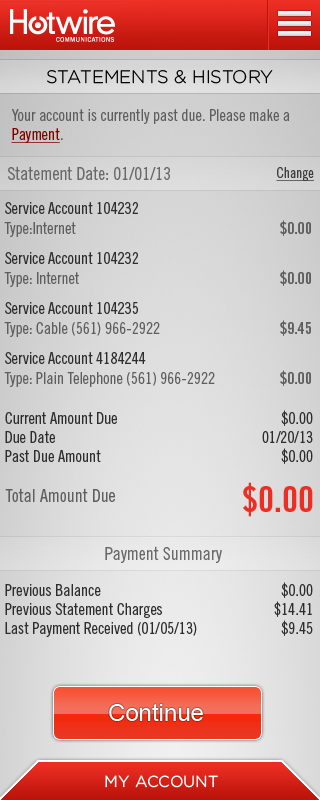
<style>
.page{position:relative;width:320px;height:800px}
.page>*{position:absolute;margin:0}
.t1{font:18px "Gotham-Light";color:#000000;text-transform:uppercase}
.t2{font:16px "TradeGothicLTStd-Cn18";color:#5e5e5e}
.t3{font:16px "TradeGothicLTStd-Cn18";color:#810000;text-decoration:underline}
.t4{font:18px "TradeGothicLTStd-Cn18";color:#696969}
.t5{font:14px "TradeGothicLTStd-Cn18";color:#3e3e3e;text-decoration:underline}
.t6{font:16px "TradeGothicLTStd-Cn18";color:#2d2d2d}
.t7{font:16px "TradeGothicLTStd-BdCn20";color:#5e5e5e}
.t8{font:36px "TradeGothicLTStd-BdCn20";color:#ed2e24}
.t9{font:18px "TradeGothicLTStd-Cn18";color:#5e5e5e}
.t10{font:24px "ArialMT";color:#ffffff}
.t11{font:16px "Gotham-Book";color:#ffffff;text-transform:uppercase}
</style>
<div class="page">
<p class="t1" style="left:47px;top:70px;width:226px;height:14px">Statements &amp; History</p>
<p class="t2" style="left:11px;top:109px;width:279px;height:34px">Your account is currently past due. Please make a <span class="t3">Payment</span>.</p>
<p class="t4" style="left:8px;top:166px;width:162px;height:14px">Statement Date: 01/01/13</p>
<p class="t5" style="left:276px;top:167px;width:38px;height:14px">Change</p>
<p class="t6" style="left:5px;top:202px;width:133px;height:12px">Service Account 104232</p>
<p class="t2" style="left:4px;top:222px;width:72px;height:15px">Type:Internet</p>
<p class="t7" style="left:280px;top:220px;width:31px;height:16px">$0.00</p>
<p class="t6" style="left:5px;top:252px;width:133px;height:12px">Service Account 104232</p>
<p class="t7" style="left:280px;top:270px;width:31px;height:16px">$0.00</p>
<p class="t2" style="left:4px;top:272px;width:75px;height:15px">Type: Internet</p>
<p class="t6" style="left:5px;top:302px;width:133px;height:12px">Service Account 104235</p>
<p class="t2" style="left:4px;top:322px;width:156px;height:15px">Type: Cable (561) 966-2922</p>
<p class="t7" style="left:280px;top:320px;width:31px;height:16px">$9.45</p>
<p class="t6" style="left:5px;top:352px;width:141px;height:12px">Service Account 4184244</p>
<p class="t2" style="left:4px;top:372px;width:211px;height:15px">Type: Plain Telephone (561) 966-2922</p>
<p class="t7" style="left:280px;top:370px;width:31px;height:16px">$0.00</p>
<p class="t6" style="left:5px;top:412px;width:112px;height:50px">Current Amount Due<br>Due Date<br>Past Due Amount</p>
<p class="t6" style="left:262px;top:410px;width:51px;height:54px;text-align:right">$0.00<br>01/20/13<br>$0.00</p>
<p class="t8" style="left:243px;top:482px;width:70px;height:35px">$0.00</p>
<p class="t9" style="left:5px;top:488px;width:110px;height:14px">Total Amount Due</p>
<p class="t4" style="left:105px;top:546px;width:117px;height:17px">Payment Summary</p>
<p class="t6" style="left:274px;top:582px;width:39px;height:54px;text-align:right">$0.00<br>$14.41<br>$9.45</p>
<p class="t6" style="left:5px;top:584px;width:192px;height:53px">Previous Balance<br>Previous Statement Charges<br>Last Payment Received (01/05/13)</p>
<p class="t10" style="left:109px;top:703px;width:94px;height:18px">Continue</p>
<p class="t11" style="left:105px;top:775px;width:113px;height:13px">My Account</p>
</div>
